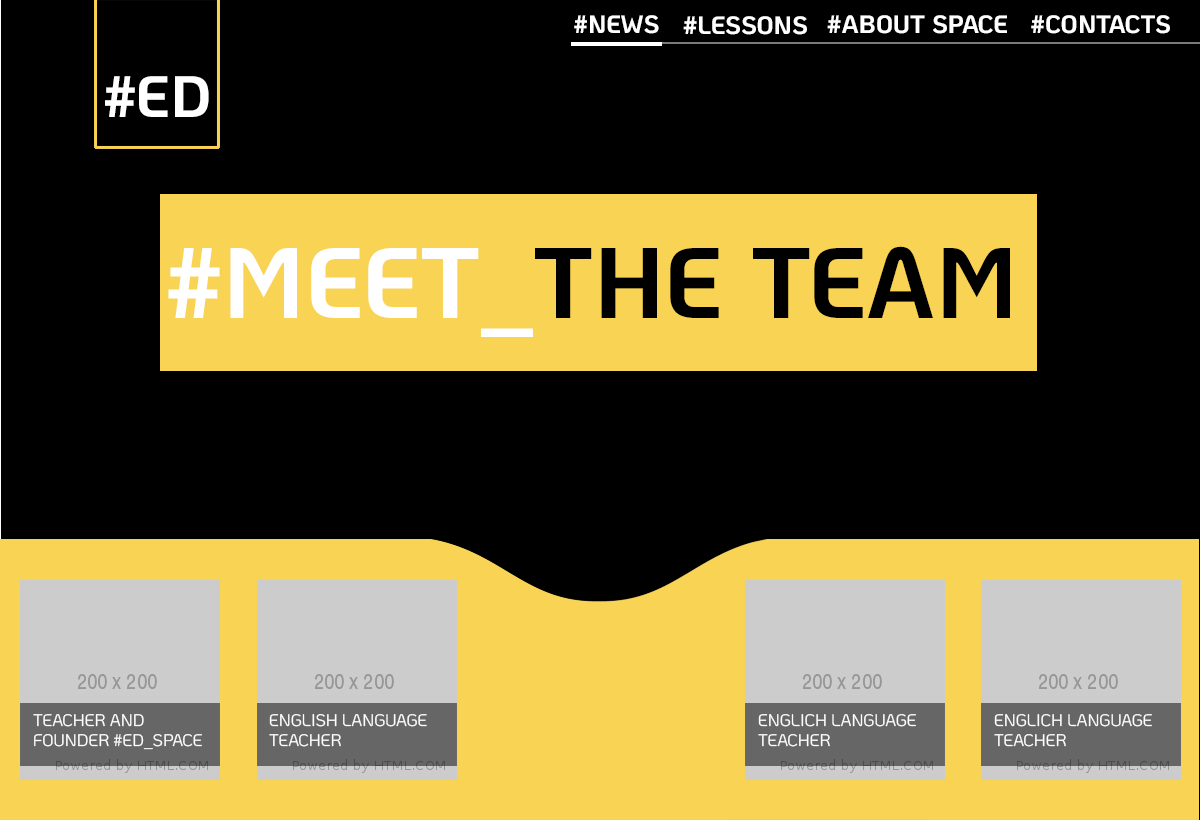
<style>
.page{position:relative;width:1200px;height:820px;background:#000000}
.page>*{position:absolute;margin:0}
.t1{font:25px "KoHo-Bold";color:#ffffff}
.t2{font:58.3px "KoHo-Bold";color:#ffffff}
.t3{font:100px "KoHo-Bold";color:#000000}
.t4{font:100px "KoHo-Bold";color:#ffffff}
.t5{font:16.7px "KoHo-Regular";color:#ffffff}
</style>
<div class="page">
<p class="t1" style="left:574px;top:15px;width:85px;height:19px">#NEWS</p>
<p class="t1" style="left:683px;top:16px;width:124px;height:19px">#LESSONS</p>
<p class="t1" style="left:827px;top:15px;width:180px;height:19px">#ABOUT SPACE</p>
<p class="t1" style="left:1031px;top:15px;width:139px;height:19px">#CONTACTS</p>
<p class="t2" style="left:105px;top:76px;width:104px;height:41px">#ED</p>
<p class="t3" style="left:168px;top:246px;width:842px;height:91px"><span class="t4">#MEET_</span>THE TEAM</p>
<p class="t5" style="left:33px;top:714px;width:169px;height:36px">TEACHER AND<br>FOUNDER #ED_SPACE</p>
<p class="t5" style="left:269px;top:714px;width:158px;height:33px">ENGLISH LANGUAGE<br>TEACHER</p>
<p class="t5" style="left:758px;top:714px;width:158px;height:33px">ENGLICH LANGUAGE<br>TEACHER</p>
<p class="t5" style="left:994px;top:714px;width:158px;height:33px">ENGLICH LANGUAGE<br>TEACHER</p>
</div>
